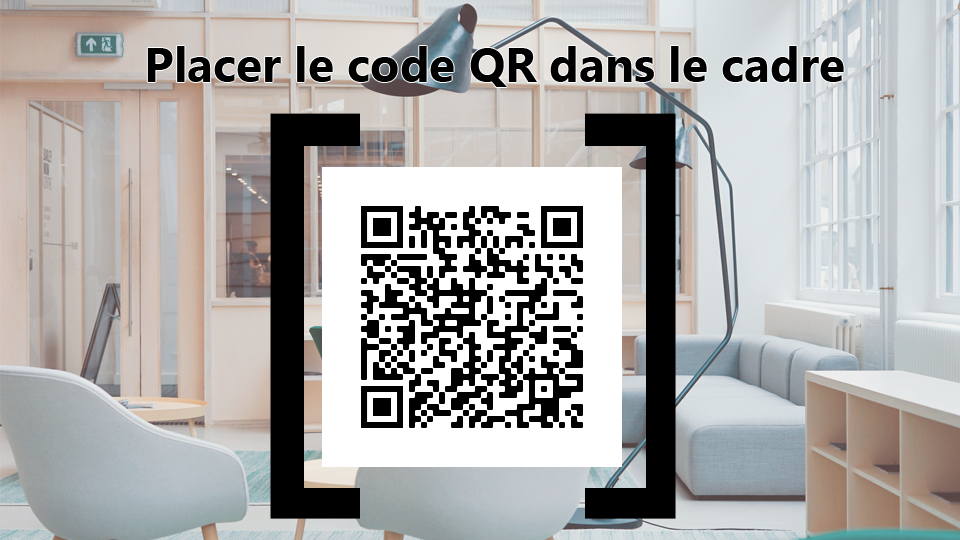
<style>
.page{position:relative;width:960px;height:540px}
.page>*{position:absolute;margin:0}
.t1{font:48px "SegoeUI-Bold";color:#000000}
</style>
<div class="page">
<p class="t1" style="left:147px;top:46px;width:697px;height:41px">Placer le code QR dans le cadre</p>
</div>
